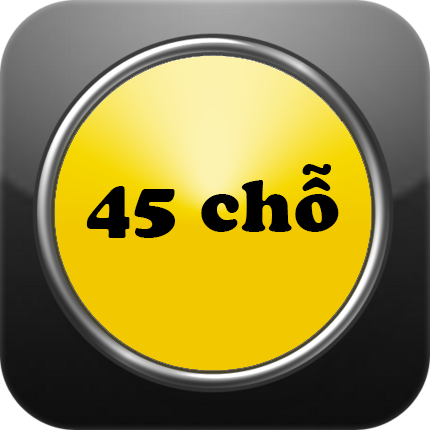
<style>
.page{position:relative;width:430px;height:430px}
.page>*{position:absolute;margin:0}
.t1{font:72px "VNI-Cooper-Heavy";color:#000000}
</style>
<div class="page">
<p class="t1" style="left:86px;top:164px;width:253px;height:74px">45 choã</p>
</div>
